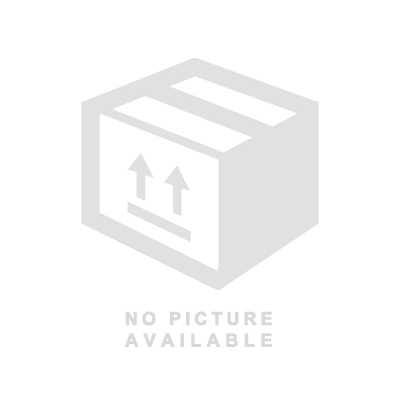
<style>
.page{position:relative;width:400px;height:400px;background:#ffffff}
.page>*{position:absolute;margin:0}
.t1{font:18px "Arial-BoldMT";letter-spacing:0.2em;color:#d9d9d9;font-weight:bold}
.t2{font:18px "Arial-BoldMT";letter-spacing:0.28em;color:#d9d9d9;font-weight:bold}
</style>
<div class="page">
<p class="t1" style="left:124px;top:311px;width:148px;height:36px;text-align:center">NO PICTURE<br><span class="t2">AVAILABLE</span></p>
</div>
